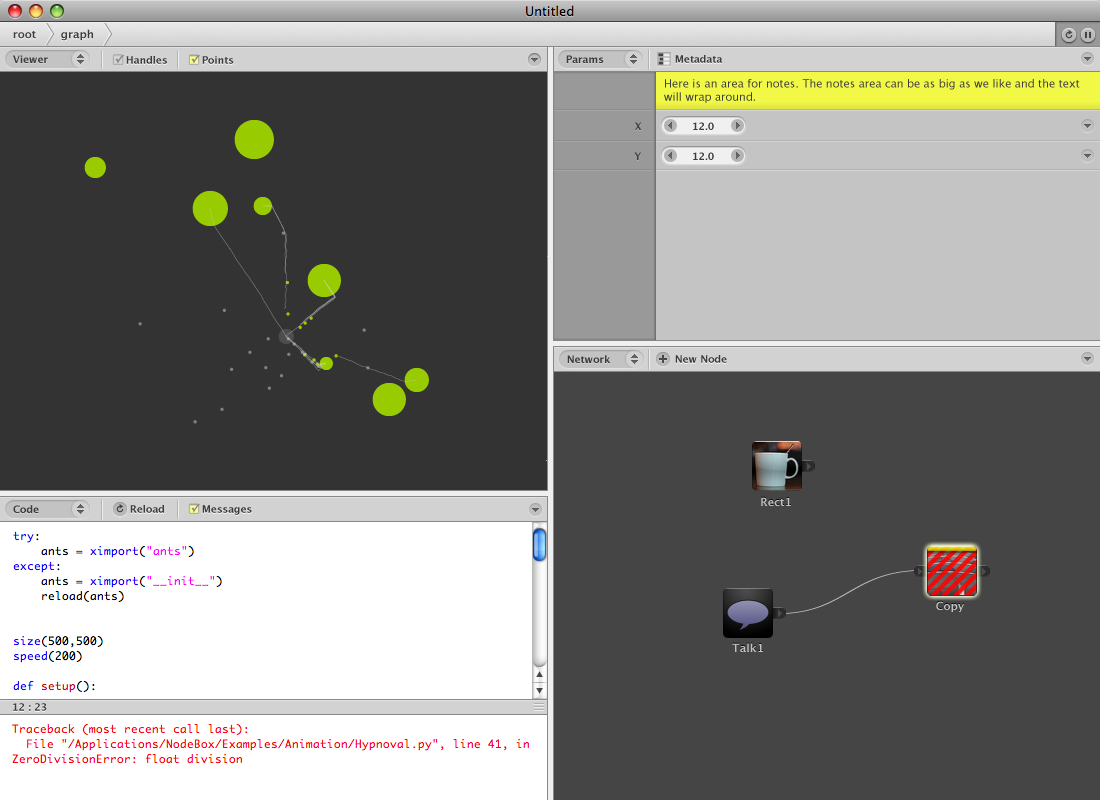
<style>
.page{position:relative;width:1100px;height:800px;background:#454545}
.page>*{position:absolute;margin:0}
.t1{font:11px "LucidaGrande-Bold";color:#3c3c3c}
.t2{font:10px "LucidaGrande-Bold";color:#3c3c3c}
.t3{font:11px "LucidaGrande-Bold";color:#888888}
.t4{font:11px "LucidaGrande";color:#3c3c3c}
.t5{font:11px "LucidaGrande-Bold";color:#c2c2c2}
</style>
<div class="page">
<p class="t1" style="left:61px;top:29px;width:32px;height:12px">graph</p>
<p class="t1" style="left:13px;top:31px;width:23px;height:8px">root</p>
<p class="t2" style="left:13px;top:55px;width:35px;height:8px">Viewer</p>
<p class="t3" style="left:115px;top:55px;width:10px;height:9px">✓</p>
<p class="t3" style="left:115px;top:55px;width:10px;height:9px">✓</p>
<p class="t2" style="left:126px;top:56px;width:41px;height:8px">Handles</p>
<p class="t3" style="left:191px;top:55px;width:10px;height:9px">✓</p>
<p class="t2" style="left:202px;top:56px;width:32px;height:8px">Points</p>
<p class="t2" style="left:566px;top:55px;width:38px;height:8px">Params</p>
<p class="t2" style="left:675px;top:55px;width:47px;height:8px">Metadata</p>
<p class="t4" style="left:664px;top:79px;width:416px;height:24px">Here is an area for notes. The notes area can be as big as we like and the text will wrap around.</p>
<p class="t2" style="left:635px;top:122px;width:7px;height:8px">X</p>
<p class="t2" style="left:693px;top:122px;width:21px;height:8px">12.0</p>
<p class="t2" style="left:634px;top:152px;width:7px;height:8px">Y</p>
<p class="t2" style="left:693px;top:152px;width:21px;height:8px">12.0</p>
<p class="t2" style="left:567px;top:355px;width:44px;height:8px">Network</p>
<p class="t2" style="left:675px;top:355px;width:52px;height:8px">New Node</p>
<p class="t5" style="left:761px;top:497px;width:30px;height:9px">Rect1</p>
<p class="t2" style="left:13px;top:505px;width:26px;height:8px">Code</p>
<p class="t2" style="left:130px;top:505px;width:34px;height:8px">Reload</p>
<p class="t3" style="left:191px;top:504px;width:10px;height:9px">✓</p>
<p class="t2" style="left:202px;top:505px;width:50px;height:10px">Messages</p>
<p class="t5" style="left:936px;top:601px;width:28px;height:11px">Copy</p>
<p class="t5" style="left:732px;top:643px;width:31px;height:9px">Talk1</p>
<p class="t2" style="left:13px;top:703px;width:34px;height:8px">12 : 23</p>
</div>
